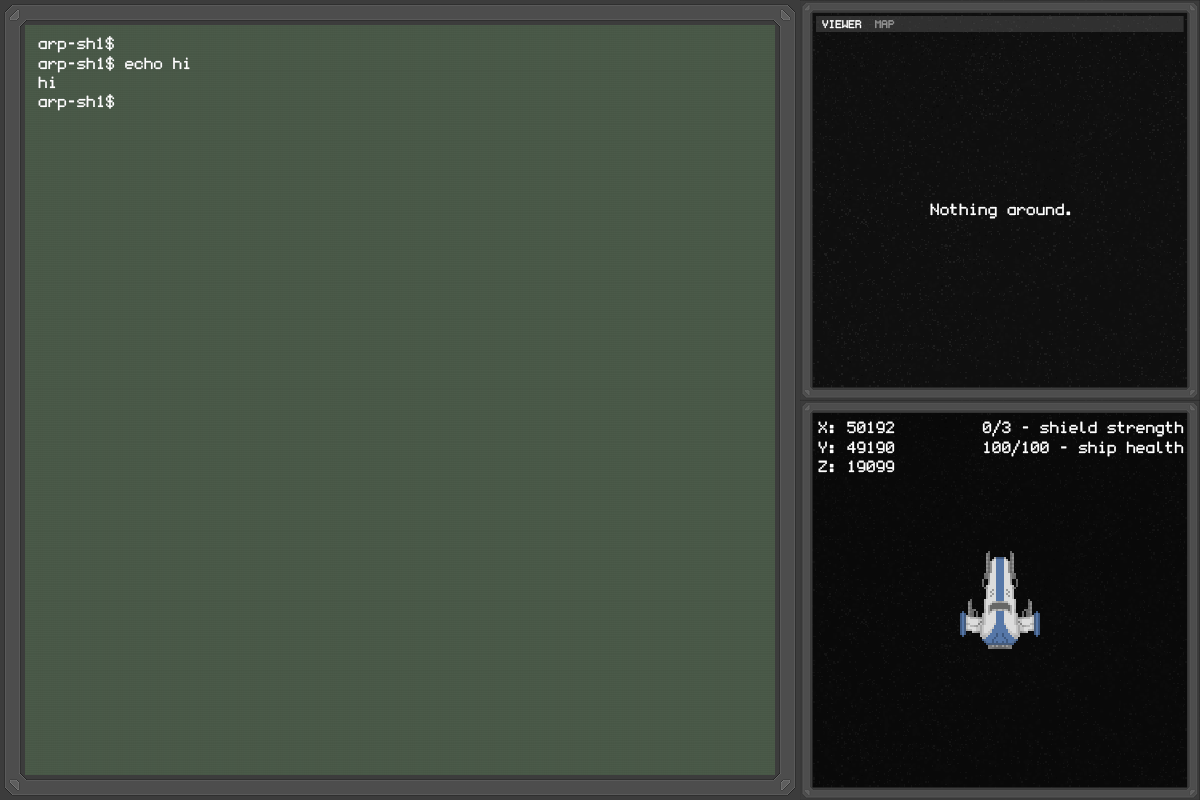
<style>
.page{position:relative;width:1200px;height:800px}
.page>*{position:absolute;margin:0}
.t1{font:11px "undefined-medium";color:#ffffff}
.t2{font:11px "undefined-medium";color:#979797}
.t3{font:16px "undefined-medium";color:#ffffff}
</style>
<div class="page">
<p class="t1" style="left:822px;top:20px;width:73px;height:9px">VIEWER  <span class="t2">MAP</span></p>
<p class="t3" style="left:38px;top:36px;width:152px;height:75px">arp-sh1$<br>arp-sh1$ echo hi<br>hi<br>arp-sh1$</p>
<p class="t3" style="left:930px;top:203px;width:141px;height:16px">Nothing around.</p>
<p class="t3" style="left:818px;top:421px;width:77px;height:52px">X: 50192<br>Y: 49190<br>Z: 19099</p>
<p class="t3" style="left:982px;top:420px;width:202px;height:37px;text-align:right">0/3 - shield strength<br>100/100 - ship health</p>
</div>
